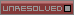
<style>
.page{position:relative;width:74px;height:15px;background:#843939}
.page>*{position:absolute;margin:0}
.t1{font:8px "BitDustTwo";color:#999999}
</style>
<div class="page">
<p class="t1" style="left:3px;top:6px;width:59px;height:5px">UNRESOLVED</p>
</div>
